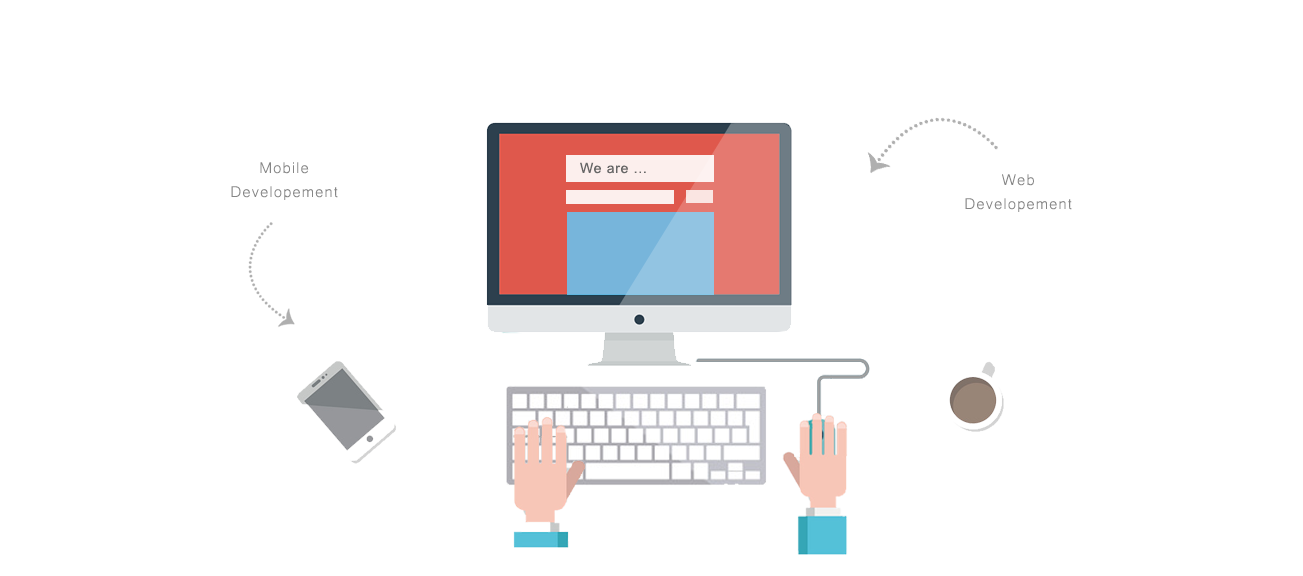
<style>
.page{position:relative;width:1303px;height:576px;background:#ffffff}
.page>*{position:absolute;margin:0}
.t1{font:20px/24px "Microsoft-Yi-Baiti";letter-spacing:0.05em;color:#868686}
.t2{font:14px "ArialMT";letter-spacing:0.05em;color:#666666}
</style>
<div class="page">
<p class="t1" style="left:231px;top:162px;width:107px;height:38px;text-align:center">Mobile <br>Developement</p>
<p class="t2" style="left:580px;top:162px;width:66px;height:12px">We are ...</p>
<p class="t1" style="left:965px;top:174px;width:107px;height:38px;text-align:center">Web <br>Developement</p>
</div>
